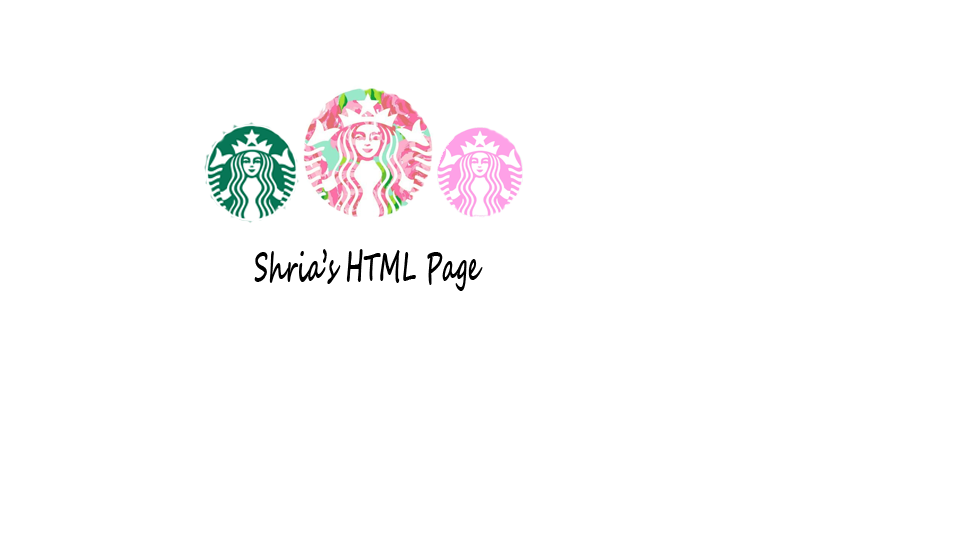
<style>
.page{position:relative;width:959px;height:549px;background:#ffffff}
.page>*{position:absolute;margin:0}
.t1{font:40.5px "SegoeScript-Bold";color:#000000;scale:0.55 1}
</style>
<div class="page">
<p class="t1" style="left:254px;top:249px;width:229px;height:42px">Shria’s HTML Page</p>
</div>
